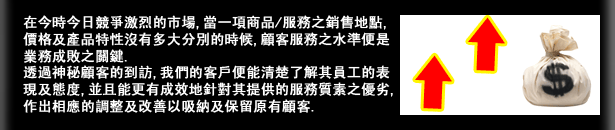
<style>
.page{position:relative;width:615px;height:130px;background:#000000}
.page>*{position:absolute;margin:0}
.t1{font:14px "SimHei";color:#ffffff;font-weight:bold}
</style>
<div class="page">
<p class="t1" style="left:23px;top:15px;width:370px;height:98px">在今時今日競爭激烈的市場,當一項商品/服務之銷售地點,<br>價格及產品特性沒有多大分別的時候,顧客服務之水準便是<br>業務成敗之關鍵.<br>透過神秘顧客的到訪,我們的客戶便能清楚了解其員工的表<br>現及態度,並且能更有成效地針對其提供的服務質素之優劣,<br>作出相應的調整及改善以吸納及保留原有顧客.</p>
</div>
